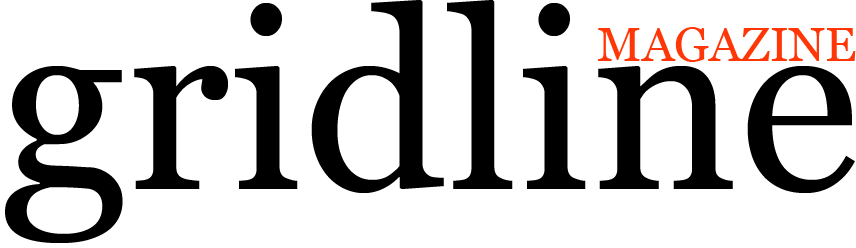
<style>
.page{position:relative;width:856px;height:248px;background:#ffffff}
.page>*{position:absolute;margin:0}
.t1{font:250px "Georgia";color:#000000}
.t2{font:48px "Georgia";color:#ff3706}
</style>
<div class="page">
<p class="t1" style="left:5px;top:0px;width:850px;height:243px">gridline &gt;&gt;&gt;</p>
<p class="t2" style="left:598px;top:27px;width:258px;height:35px">MAGAZINE</p>
</div>
